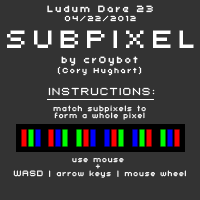
<style>
.page{position:relative;width:200px;height:200px;background:#333333}
.page>*{position:absolute;margin:0}
.t1{font:10px "Uni0553";letter-spacing:0.2em;color:#ffffff}
.t2{font:8px "Uni0553";letter-spacing:0.2em;color:#ffffff}
.t3{font:8px "Standard0751";letter-spacing:0.2em;color:#ffffff}
.t4{font:6px "Standard0751";letter-spacing:0.2em;color:#ffffff}
</style>
<div class="page">
<p class="t1" style="left:47px;top:5px;width:106px;height:17px;text-align:center">Ludum Dare 23<br><span class="t2">04/22/2012</span></p>
<p class="t2" style="left:57px;top:56px;width:85px;height:20px;text-align:center"><span class="t1">by cr0ybot<br></span>(Cory Hughart)</p>
<p class="t3" style="left:48px;top:87px;width:107px;height:9px">INSTRUCTIONS:</p>
<p class="t4" style="left:53px;top:105px;width:93px;height:15px;text-align:center">match subpixels to<br>form a whole pixel</p>
<p class="t4" style="left:13px;top:158px;width:173px;height:20px;text-align:center">use mouse <br>+ <br>WASD | arrow keys | mouse wheel</p>
</div>
